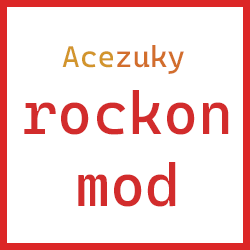
<style>
.page{position:relative;width:250px;height:250px;background:#ffffff}
.page>*{position:absolute;margin:0}
.t1{font:30px "CascadiaMono-Roman";color:#d26e2c}
.t2{font:30px "CascadiaMono-Roman";color:#d2952c}
.t3{font:60px/72px "CascadiaMono-Roman";color:#d22c2c}
</style>
<div class="page">
<p class="t1" style="left:62px;top:45px;width:122px;height:29px"><span class="t2">Ace</span>zuky</p>
<p class="t3" style="left:24px;top:90px;width:205px;height:117px;text-align:center">rockon<br>mod</p>
</div>
